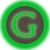
<style>
.page{position:relative;width:50px;height:50px}
.page>*{position:absolute;margin:0}
.t1{font:32.1px "PerpetuaTitlingMT-Light";color:#09c12c}
</style>
<div class="page">
<p class="t1" style="left:12px;top:13px;width:25px;height:23px">G</p>
</div>
